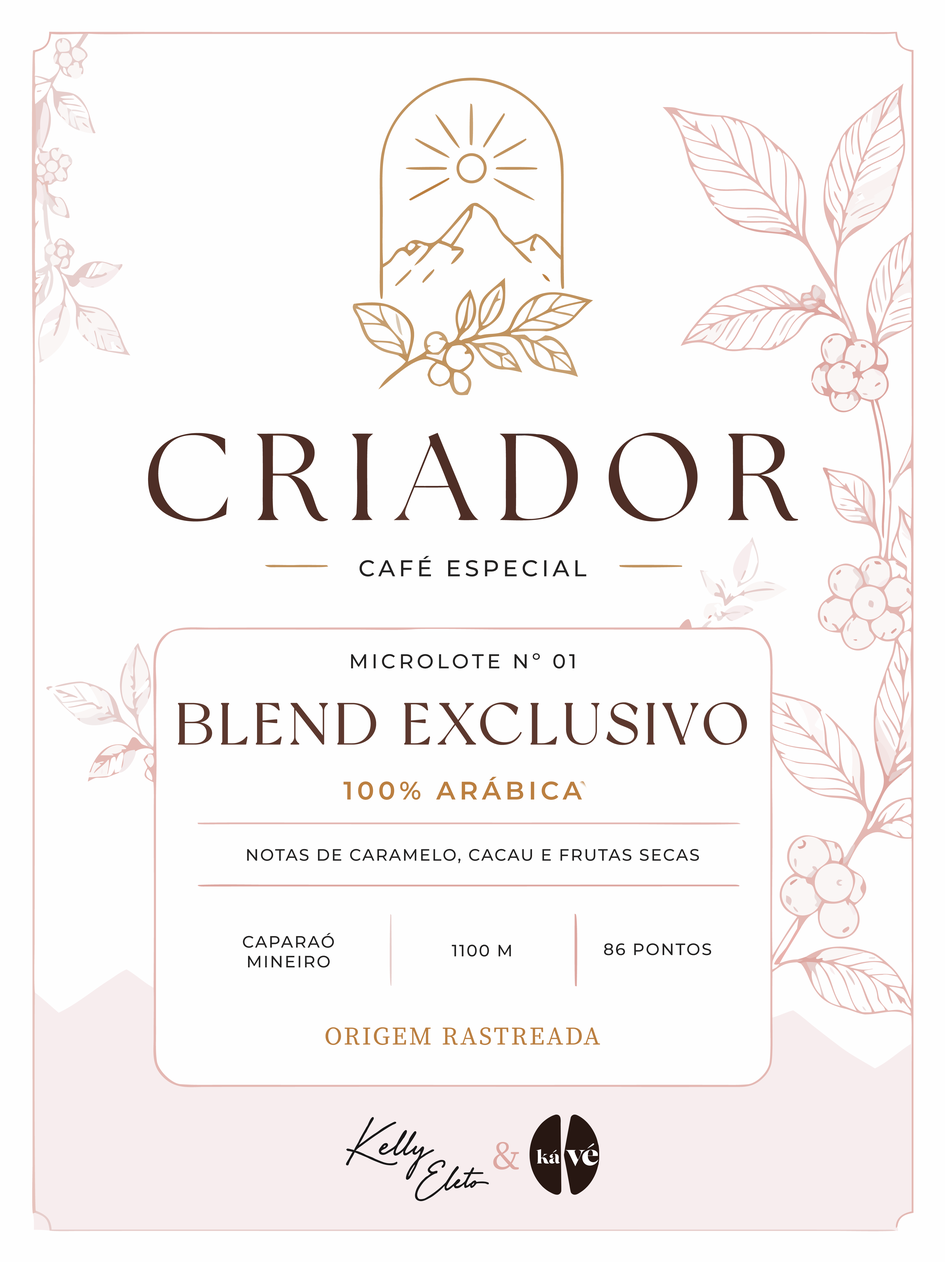
<style>
.page{position:relative;width:945px;height:1262px;background:#fefefe}
.page>*{position:absolute;margin:0}
.t1{font:22.9px "Montserrat-Medium";letter-spacing:0.16em;color:#232222}
.t2{font:20.2px "Montserrat-Medium";letter-spacing:0.16em;color:#232222}
.t3{font:58.3px "NewYork";letter-spacing:0.098em;color:#5c382e}
.t4{font:25.4px "Montserrat-SemiBold";letter-spacing:0.16em;color:#bb7f40}
.t5{font:16.5px "Montserrat-Medium";letter-spacing:0.08em;color:#232222;text-transform:uppercase}
.t6{font:16.5px "Montserrat-Medium";letter-spacing:0.08em;color:#232222}
.t7{font:25.2px "SourceSerifVariable-Roman";letter-spacing:0.08em;color:#bb7f40}
.t8{font:39.5px "SourceSerifVariable-Roman";letter-spacing:0.08em;color:#dda7a1}
</style>
<div class="page">
<p class="t1" style="left:359px;top:556px;width:227px;height:21px">CAFÉ ESPECIAL</p>
<p class="t2" style="left:351px;top:653px;width:223px;height:16px">MICROLOTE Nº 01</p>
<p class="t3" style="left:178px;top:703px;width:569px;height:42px">BLEND EXCLUSIVO</p>
<p class="t4" style="left:343px;top:777px;width:239px;height:23px">100% ARÁBICA</p>
<p class="t5" style="left:247px;top:849px;width:452px;height:14px">NOTAS DE Caramelo, cacau e frutas secas</p>
<p class="t6" style="left:243px;top:933px;width:91px;height:35px;text-align:center">CAPARAÓ<br>MINEIRO</p>
<p class="t6" style="left:452px;top:945px;width:59px;height:12px">1100 M</p>
<p class="t6" style="left:604px;top:943px;width:107px;height:12px">86 PONTOS</p>
<p class="t7" style="left:325px;top:1027px;width:275px;height:18px">ORIGEM RASTREADA</p>
<p class="t8" style="left:493px;top:1142px;width:26px;height:28px">&amp;</p>
</div>
